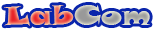
<style>
.page{position:relative;width:155px;height:29px;background:#ffffff}
.page>*{position:absolute;margin:0}
.t1{font:27.4px "SnapITC-Regular";scale:1.27 1}
</style>
<div class="page">
<p class="t1" style="left:4px;top:5px;width:146px;height:21px">LabCom</p>
</div>
